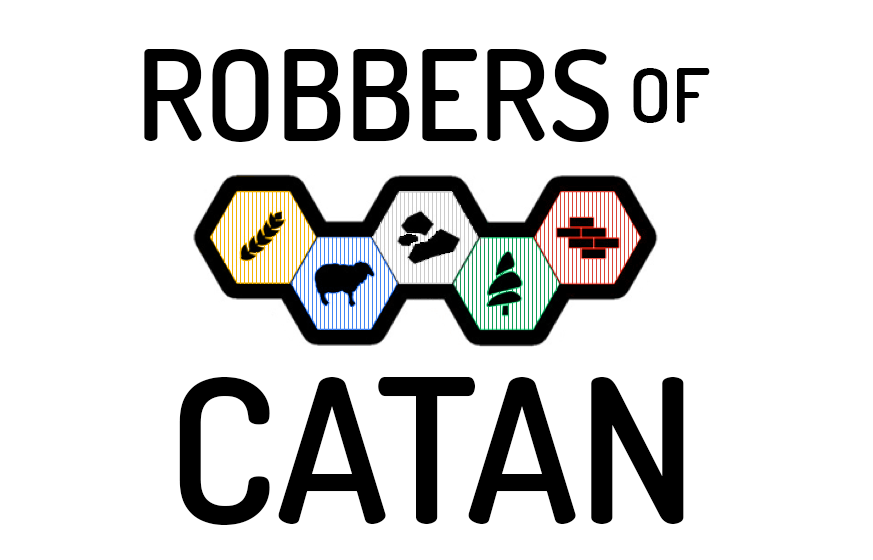
<style>
.page{position:relative;width:873px;height:560px;background:#ffffff}
.page>*{position:absolute;margin:0}
.t1{font:125px "Dosis-SemiBold";color:#000000}
.t2{font:75px "Dosis-SemiBold";color:#000000}
.t3{font:200px "Dosis-SemiBold";color:#000000}
</style>
<div class="page">
<p class="t1" style="left:144px;top:49px;width:465px;height:93px">ROBBERS</p>
<p class="t2" style="left:633px;top:68px;width:77px;height:55px">OF</p>
<p class="t3" style="left:179px;top:377px;width:505px;height:148px">CATAN</p>
</div>
